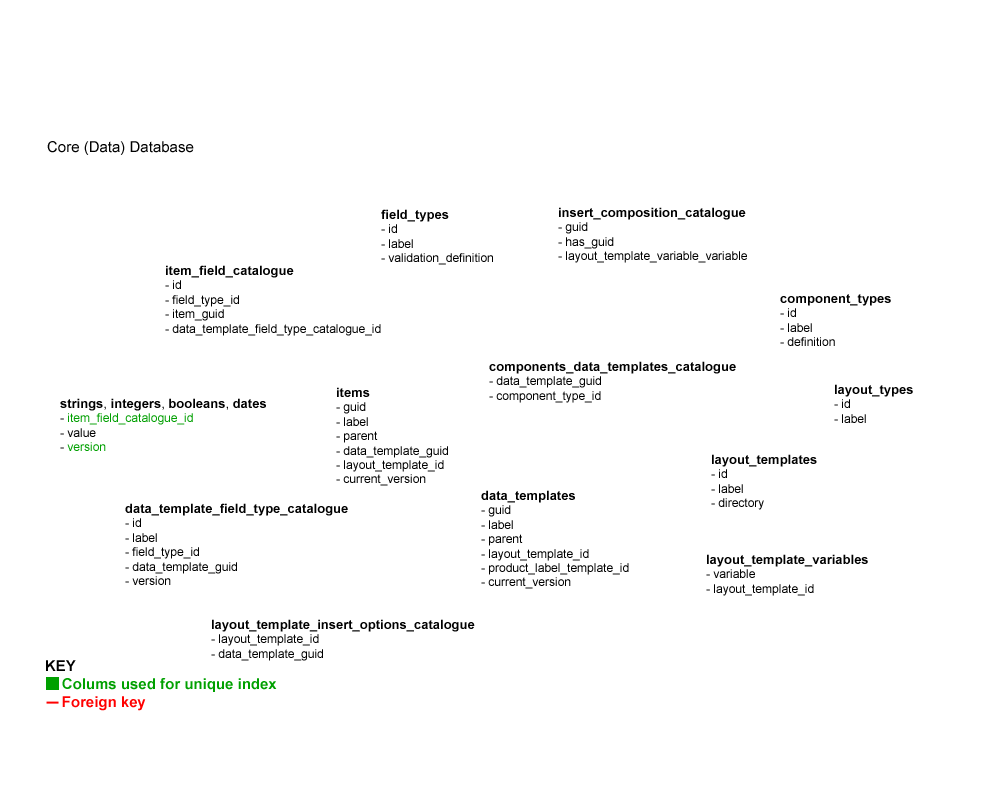
<style>
.page{position:relative;width:1000px;height:800px;background:#ffffff}
.page>*{position:absolute;margin:0}
.t1{font:15px "ArialMT";color:#000000}
.t2{font:12px "ArialMT";color:#000000}
.t3{font:13px "Arial-BoldMT";color:#000000}
.t4{font:12px "ArialMT";color:#009f00}
.t5{font:13px "ArialMT";color:#000000}
.t6{font:12px "ArialMT";color:#00a000}
.t7{font:15px "Arial-BoldMT";color:#00a000}
.t8{font:15px "Arial-BoldMT";color:#000000}
.t9{font:15px "Arial-BoldMT";color:#ff0000}
</style>
<div class="page">
<p class="t1" style="left:47px;top:141px;width:147px;height:14px">Core (Data) Database</p>
<p class="t2" style="left:381px;top:209px;width:112px;height:56px"><span class="t3">field_types<br></span>- id<br>- label<br>- validation_definition</p>
<p class="t2" style="left:558px;top:207px;width:189px;height:56px"><span class="t3">insert_composition_catalogue<br></span>- guid<br>- has_guid<br>- layout_template_variable_variable</p>
<p class="t2" style="left:165px;top:265px;width:216px;height:71px"><span class="t3">item_field_catalogue<br></span>- id<br>- field_type_id<br>- item_guid<br>- data_template_field_type_catalogue_id</p>
<p class="t2" style="left:780px;top:294px;width:111px;height:52px"><span class="t3">component_types<br></span>- id<br>- label<br>- definition</p>
<p class="t2" style="left:489px;top:361px;width:247px;height:42px"><span class="t3">components_data_templates_catalogue<br></span>- data_template_guid<br>- component_type_id</p>
<p class="t2" style="left:336px;top:387px;width:112px;height:99px"><span class="t3">items<br></span>- guid<br>- label<br>- parent<br>- data_template_guid<br>- layout_template_id<br>- current_version</p>
<p class="t3" style="left:834px;top:384px;width:79px;height:39px">layout_types<br><span class="t2">- id<br>- label</span></p>
<p class="t4" style="left:60px;top:398px;width:206px;height:53px"><span class="t3">strings</span><span class="t5">, </span><span class="t3">integers</span><span class="t5">, </span><span class="t3">booleans</span><span class="t5">, </span><span class="t3">dates<br></span><span class="t2">- </span>item_field_catalogue_id<br><span class="t2">- value<br>- </span><span class="t6">version</span></p>
<p class="t2" style="left:711px;top:454px;width:106px;height:56px"><span class="t3">layout_templates<br></span>- id<br>- label<br>- directory</p>
<p class="t2" style="left:481px;top:490px;width:148px;height:99px"><span class="t3">data_templates<br></span>- guid<br>- label<br>- parent<br>- layout_template_id<br>- product_label_template_id<br>- current_version</p>
<p class="t2" style="left:125px;top:503px;width:223px;height:82px"><span class="t3">data_template_field_type_catalogue<br></span>- id<br>- label<br>- field_type_id<br>- data_template_guid<br>- version</p>
<p class="t2" style="left:706px;top:554px;width:162px;height:42px"><span class="t3">layout_template_variables<br></span>- variable<br>- layout_template_id</p>
<p class="t2" style="left:211px;top:619px;width:264px;height:42px"><span class="t3">layout_template_insert_options_catalogue<br></span>- layout_template_id<br>- data_template_guid</p>
<p class="t7" style="left:46px;top:660px;width:231px;height:51px"><span class="t8">KEY<br></span>    Colums used for unique index<br>    <span class="t9">Foreign key</span></p>
</div>
